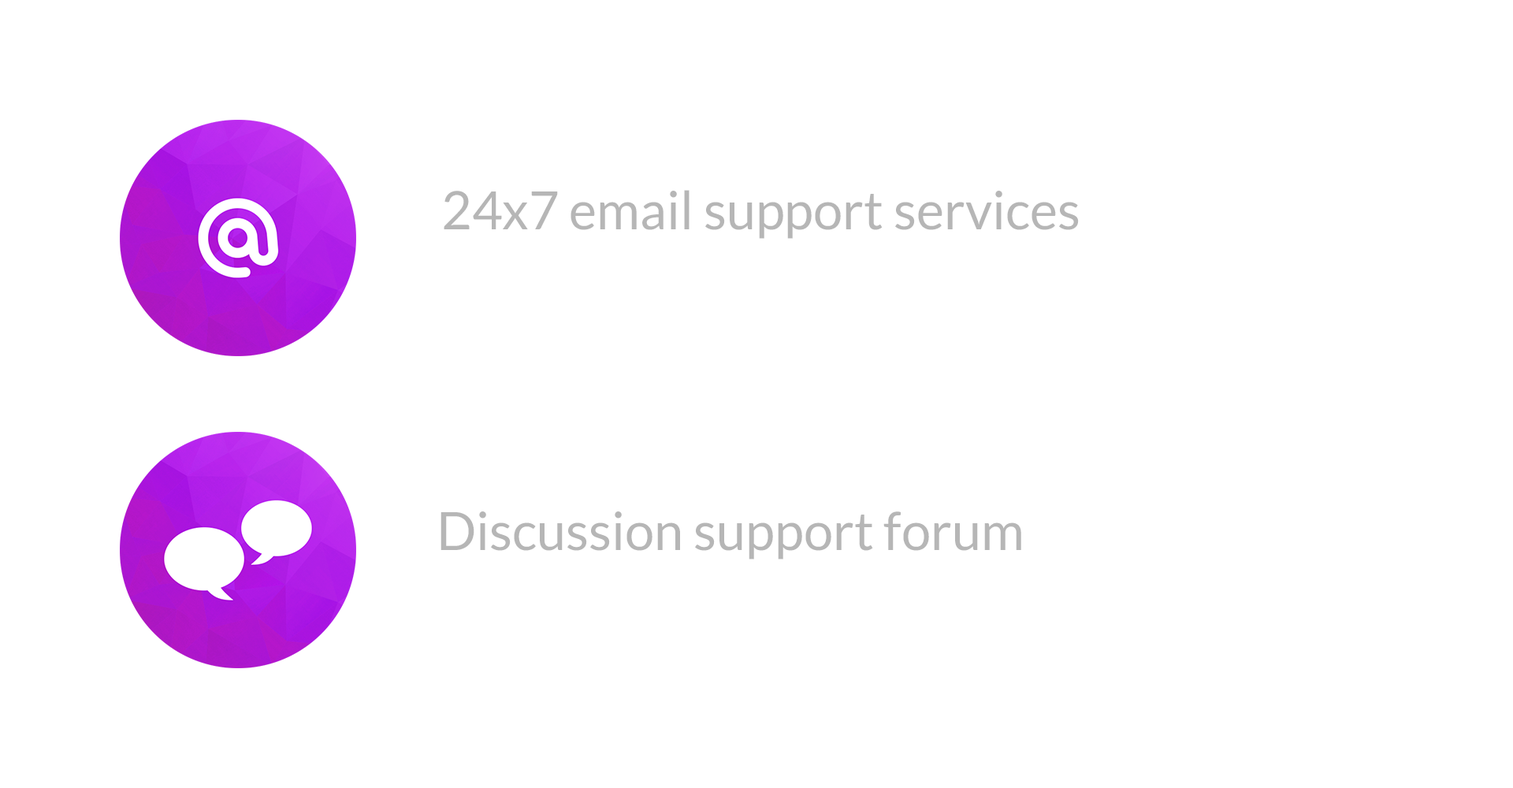
<style>
.page{position:relative;width:1513px;height:788px;background:#ffffff}
.page>*{position:absolute;margin:0}
.t1{font:52.5px "Lato-Regular";color:#b6b6b6}
</style>
<div class="page">
<p class="t1" style="left:444px;top:190px;width:635px;height:49px">24x7 email support services</p>
<p class="t1" style="left:441px;top:511px;width:580px;height:49px">Discussion support forum</p>
</div>
